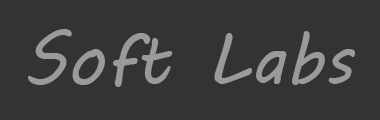
<style>
.page{position:relative;width:380px;height:120px;background:#333333}
.page>*{position:absolute;margin:0}
.t1{font:72px "MVBoli";color:#9a9a9a}
</style>
<div class="page">
<p class="t1" style="left:28px;top:29px;width:327px;height:58px">Soft Labs</p>
</div>
